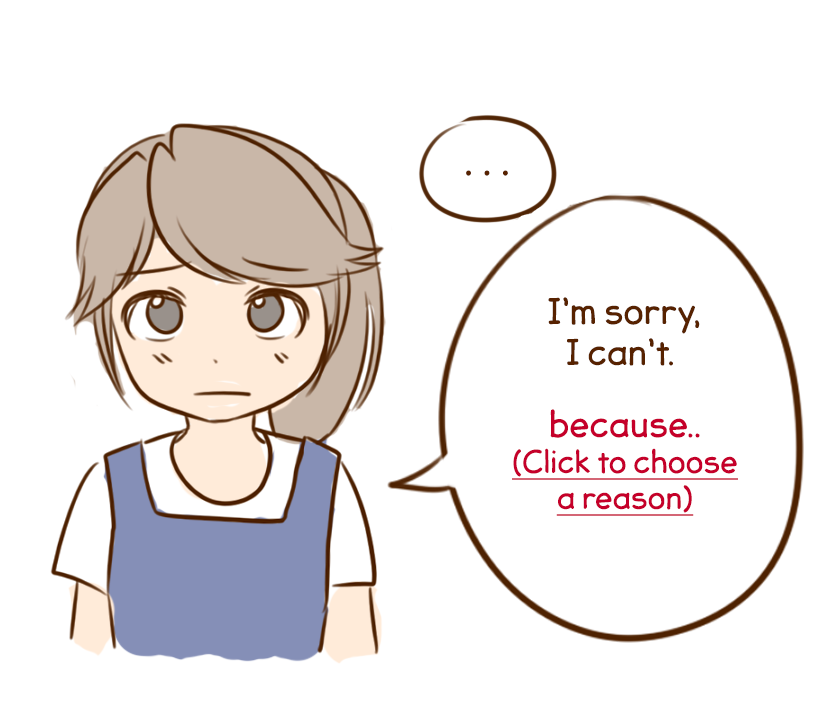
<style>
.page{position:relative;width:818px;height:701px;background:#ffffff}
.page>*{position:absolute;margin:0}
.t1{font:42.4px "JollyGoodSans-Basic";color:#572200}
.t2{font:34.1px "JollyGoodSans-Basic";color:#572200}
.t3{font:29.9px "JollyGoodSans-Basic";color:#c5002a;text-decoration:underline}
.t4{font:34.1px "JollyGoodSans-Basic";color:#c5002a}
</style>
<div class="page">
<p class="t1" style="left:466px;top:170px;width:42px;height:6px">. . .</p>
<p class="t2" style="left:548px;top:297px;width:152px;height:69px;text-align:center">I’m sorry,<br>I can’t.</p>
<p class="t3" style="left:512px;top:409px;width:226px;height:107px;text-align:center"><span class="t4">because..<br></span>(Click to choose<br>a reason)</p>
</div>
